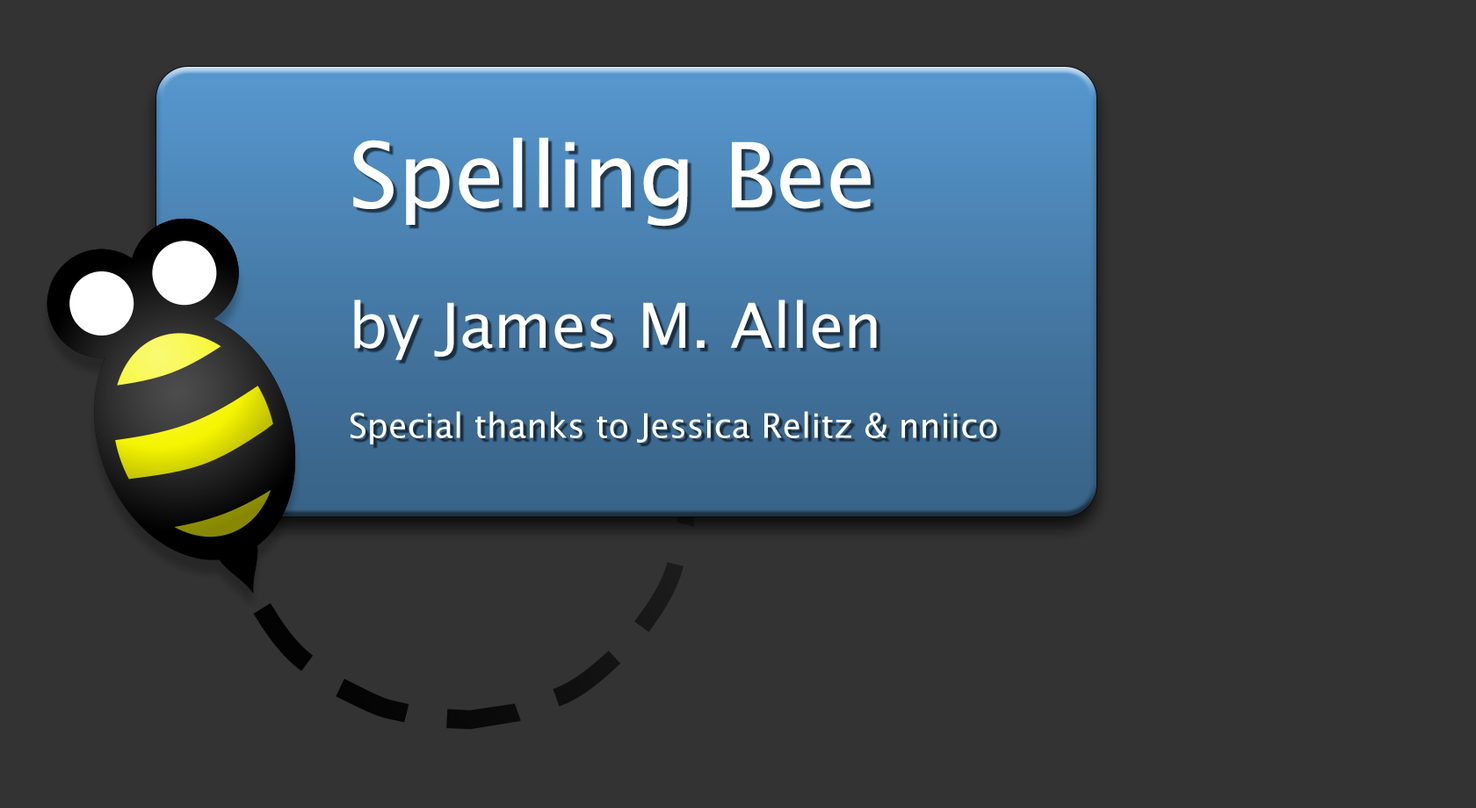
<style>
.page{position:relative;width:1476px;height:808px;background:#333333}
.page>*{position:absolute;margin:0}
.t1{font:90.2px "LucidaSans";color:#ffffff}
.t2{font:34px "LucidaSans";color:#ffffff}
.t3{font:62.1px "LucidaSans";color:#ffffff}
</style>
<div class="page">
<p class="t1" style="left:353px;top:137px;width:517px;height:90px">Spelling Bee</p>
<p class="t2" style="left:350px;top:300px;width:647px;height:144px"><span class="t3">by James M. Allen<br><br></span>Special thanks to Jessica Relitz &amp; nniico</p>
</div>
